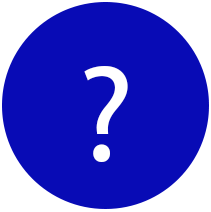
<style>
.page{position:relative;width:211px;height:212px;background:#080bb5}
.page>*{position:absolute;margin:0}
.t1{font:140px "MyriadPro-Regular";color:#ffffff}
</style>
<div class="page">
<p class="t1" style="left:84px;top:66px;width:44px;height:96px">?</p>
</div>
